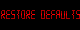
<style>
.page{position:relative;width:80px;height:30px;background:#000000}
.page>*{position:absolute;margin:0}
.t1{font:13.3px "Digital-7Mono";scale:0.77 1}
</style>
<div class="page">
<p class="t1" style="left:1px;top:10px;width:79px;height:9px">restore defaults</p>
</div>
